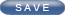
<style>
.page{position:relative;width:65px;height:15px}
.page>*{position:absolute;margin:0}
.t1{font:10px "ArialMT";color:#ffffff}
</style>
<div class="page">
<p class="t1" style="left:15px;top:4px;width:34px;height:7px">S A V E</p>
</div>
